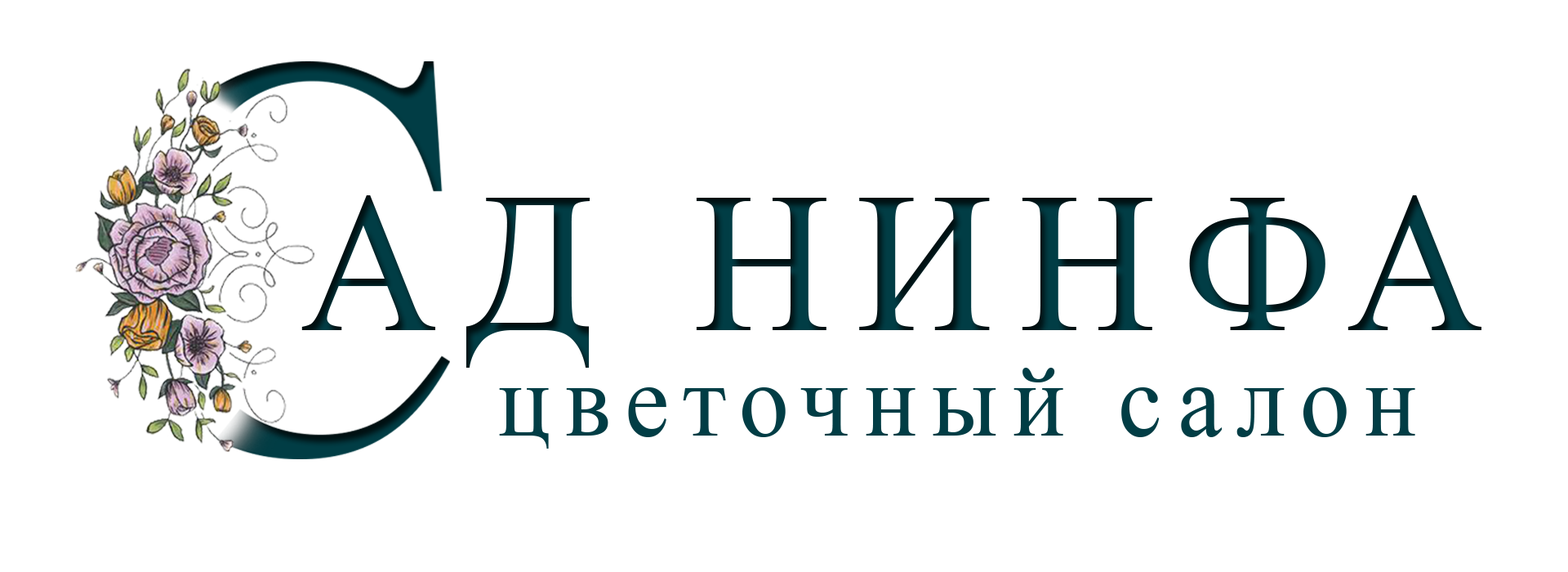
<style>
.page{position:relative;width:1568px;height:572px;background:#ffffff}
.page>*{position:absolute;margin:0}
.t1{font:199.1px "TimesNewRomanPSMT";letter-spacing:0.14em;color:#013d45;scale:0.95 1}
.t2{font:104.7px "TimesNewRomanPSMT";letter-spacing:0.14em;color:#013d45;scale:0.95 1}
</style>
<div class="page">
<p class="t1" style="left:301px;top:195px;width:1180px;height:173px">АД НИНФА</p>
<p class="t2" style="left:499px;top:368px;width:916px;height:80px">цветочный салон</p>
</div>
